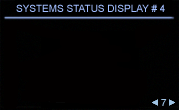
<style>
.page{position:relative;width:179px;height:110px;background:#020000}
.page>*{position:absolute;margin:0}
.t1{font:10px "ArialMT";color:#a2beff;font-variant:small-caps}
.t2{font:10px "ArialMT";color:#9fc3e3;font-variant:small-caps}
</style>
<div class="page">
<p class="t1" style="left:16px;top:4px;width:149px;height:8px">SYSTEMS STATUS DISPLAY # 4</p>
<p class="t2" style="left:161px;top:99px;width:6px;height:7px">7</p>
</div>
